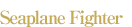
<style>
.page{position:relative;width:132px;height:27px;background:#ffffff}
.page>*{position:absolute;margin:0}
.t1{font:18px "RyuminPro-ExBold";letter-spacing:-0.08em;color:#c4a956}
</style>
<div class="page">
<p class="t1" style="left:0px;top:10px;width:123px;height:17px">Seaplane Fighter</p>
</div>
